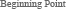
<style>
.page{position:relative;width:80px;height:10px;background:#ffffff}
.page>*{position:absolute;margin:0}
.t1{font:10px "TimesNewRomanPSMT";color:#646464}
</style>
<div class="page">
<p class="t1" style="left:0px;top:0px;width:66px;height:9px">Beginning Point</p>
</div>
